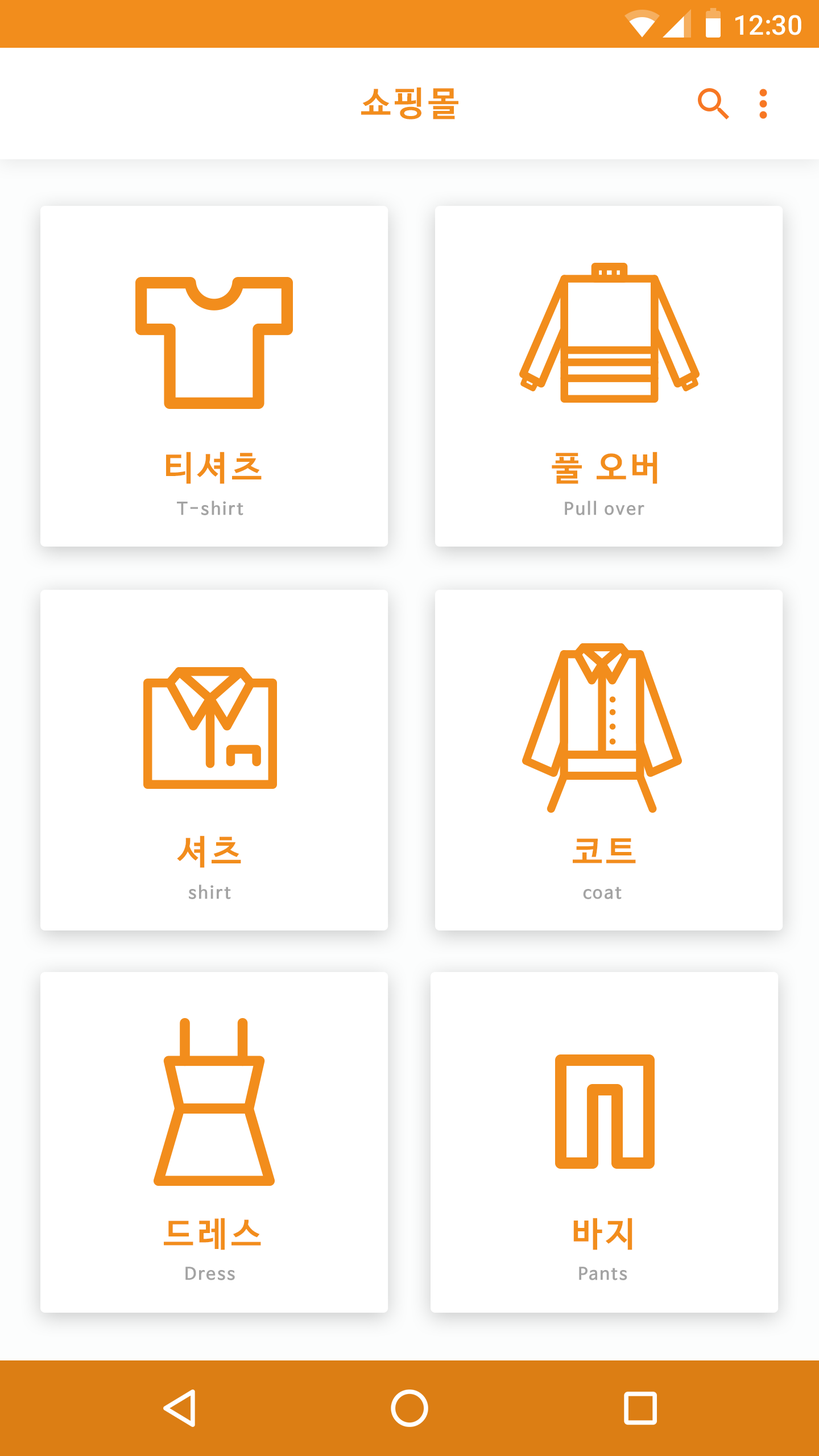
<style>
.page{position:relative;width:819px;height:1456px;background:#ffffff}
.page>*{position:absolute;margin:0}
.t1{font:27.3px "Roboto-Medium";color:#ffffff}
.t2{font:34.1px "NanumBarunGothicBold";letter-spacing:0.1em;color:#f28d1c}
.t3{font:17.1px "NanumBarunGothicBold";letter-spacing:0.1em;color:#a3a3a3}
</style>
<div class="page">
<p class="t1" style="left:735px;top:15px;width:66px;height:20px">12:30</p>
<p class="t2" style="left:361px;top:87px;width:97px;height:32px">쇼핑몰</p>
<p class="t2" style="left:166px;top:452px;width:96px;height:32px">티셔츠</p>
<p class="t2" style="left:552px;top:452px;width:105px;height:32px">풀 오버</p>
<p class="t3" style="left:177px;top:500px;width:66px;height:15px">T-shirt</p>
<p class="t3" style="left:565px;top:500px;width:79px;height:15px">Pull over</p>
<p class="t2" style="left:177px;top:835px;width:64px;height:33px">셔츠</p>
<p class="t2" style="left:573px;top:838px;width:63px;height:25px">코트</p>
<p class="t3" style="left:189px;top:884px;width:42px;height:15px">shirt</p>
<p class="t3" style="left:583px;top:887px;width:39px;height:12px">coat</p>
<p class="t2" style="left:164px;top:1218px;width:97px;height:32px">드레스</p>
<p class="t2" style="left:573px;top:1218px;width:59px;height:32px">바지</p>
<p class="t3" style="left:185px;top:1267px;width:50px;height:13px">Dress</p>
<p class="t3" style="left:579px;top:1267px;width:48px;height:13px">Pants</p>
</div>
